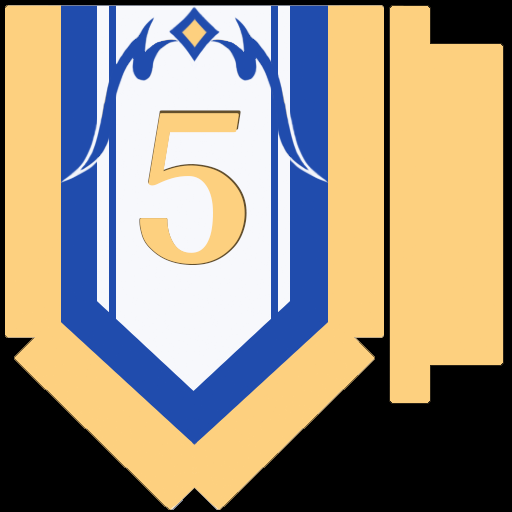
<style>
.page{position:relative;width:512px;height:512px;background:#fdd07f}
.page>*{position:absolute;margin:0}
.t1{font:200px "HaanSollipB";color:#fdd07f}
.t2{font:195px "HaanSollipB";color:#fdd07f}
</style>
<div class="page">
<p class="t1" style="left:139px;top:110px;width:108px;height:155px">5</p>
<p class="t2" style="left:140px;top:113px;width:105px;height:151px">5</p>
</div>
